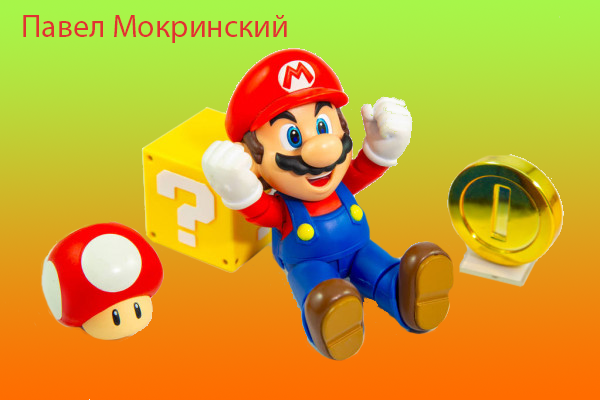
<style>
.page{position:relative;width:600px;height:400px}
.page>*{position:absolute;margin:0}
.t1{font:32px "MyriadPro-Regular";color:#e13232}
</style>
<div class="page">
<p class="t1" style="left:23px;top:15px;width:264px;height:28px">Павел Мокринский</p>
</div>
